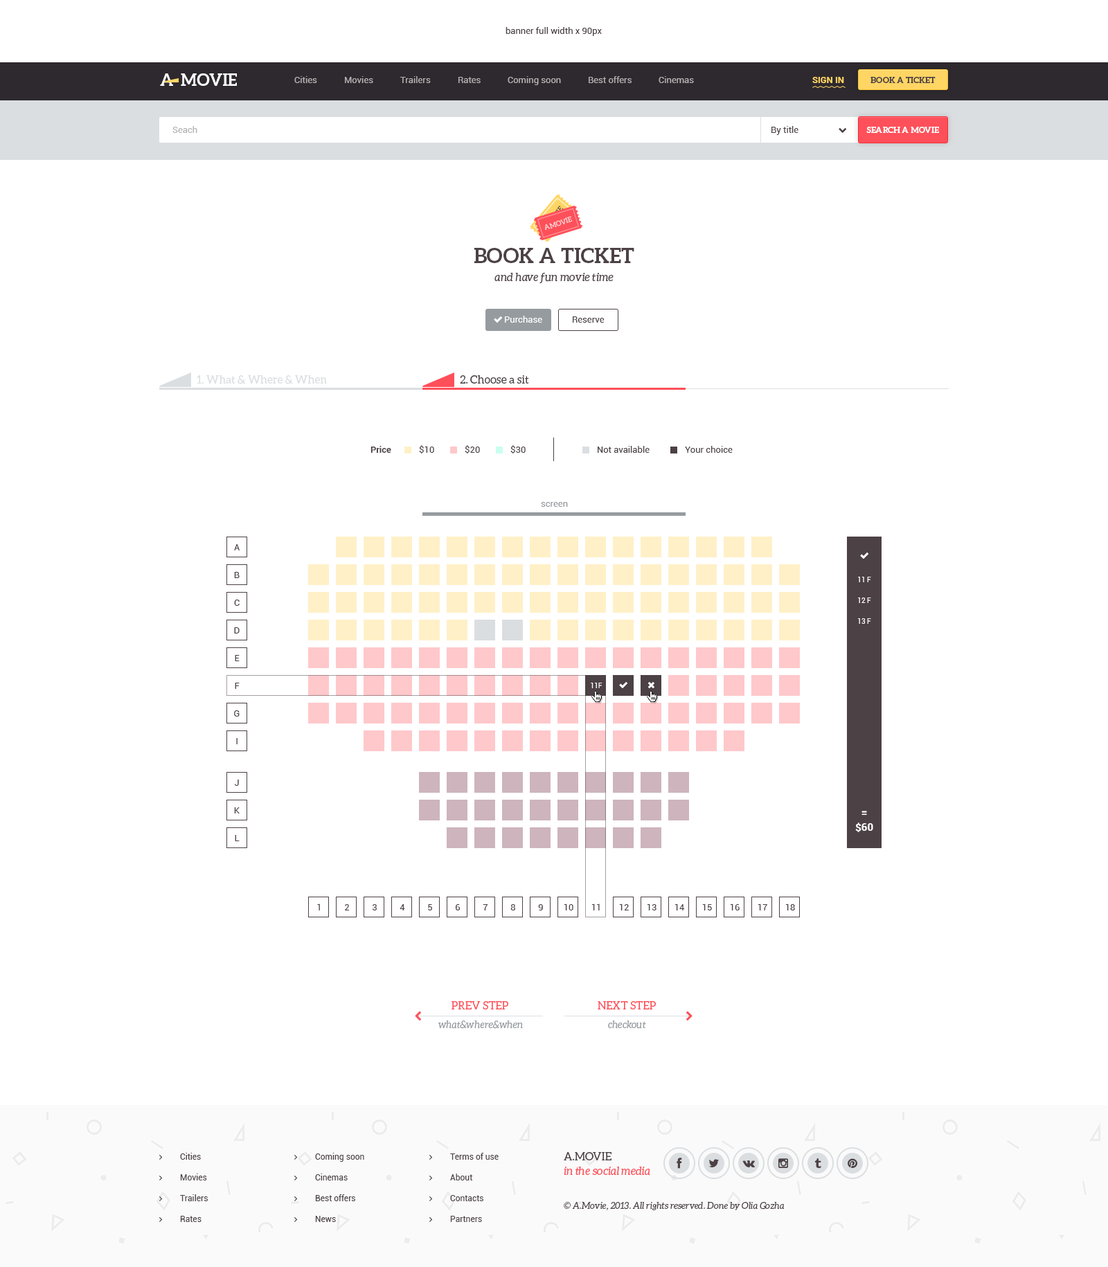
<style>
.page{position:relative;width:1108px;height:1267px;background:#ffffff}
.page>*{position:absolute;margin:0}
.t1{font:9px "Roboto-Regular";color:#4c4145}
.t2{font:16.6px "Aleo-Bold";color:#ffffff;text-transform:uppercase}
.t3{font:9px "Roboto-Regular";color:#b4b1b2}
.t4{font:9px "Roboto-Bold";color:#ffd564;text-transform:uppercase}
.t5{font:8.3px "Aleo-Bold";color:#4c4145;text-transform:uppercase}
.t6{font:8.3px "Aleo-Bold";color:#ffffff;text-transform:uppercase}
.t7{font:6.9px "Aleo-Regular";color:#fe505a;text-transform:uppercase}
.t8{font:6.9px "Aleo-Regular";color:#ffd5d7;text-transform:uppercase}
.t9{font:11.1px/18px "Aleo-Italic";color:#4c4145}
.t10{font:20.8px/18px "Aleo-Bold";color:#4c4145;text-transform:uppercase}
.t11{font:9px "Roboto-Regular";color:#ffffff}
.t12{font:11.1px "Aleo-Regular";color:#dbdee1}
.t13{font:11.1px "Aleo-Regular";color:#4c4145}
.t14{font:9px "Roboto-Bold";color:#4c4145}
.t15{font:9px "Roboto-Regular";color:#969b9f}
.t16{font:6.9px "Roboto-Regular";color:#ffffff}
.t17{font:9px "Roboto-Regular"}
.t18{font:10.4px/14.5px "Roboto-Bold";color:#ffffff}
.t19{font:11.1px "Aleo-Regular";color:#fe505a;text-transform:uppercase}
.t20{font:9.7px "Aleo-Italic";color:#969b9f}
.t21{font:8.3px "Roboto-Regular";color:#4c4145}
.t22{font:11.1px/14.5px "Aleo-Italic";color:#fe505a}
.t23{font:11.1px/14.5px "Aleo-Regular";color:#4c4145;text-transform:uppercase}
.t24{font:9px "Aleo-Italic";color:#4c4145}
</style>
<div class="page">
<p class="t1" style="left:505px;top:27px;width:97px;height:9px">banner full width x 90px</p>
<p class="t2" style="left:160px;top:73px;width:13px;height:13px">A</p>
<p class="t2" style="left:181px;top:73px;width:56px;height:13px">movie</p>
<p class="t3" style="left:294px;top:76px;width:23px;height:7px">Cities</p>
<p class="t3" style="left:345px;top:76px;width:28px;height:7px">Movies</p>
<p class="t3" style="left:400px;top:76px;width:31px;height:7px">Trailers</p>
<p class="t3" style="left:458px;top:77px;width:22px;height:6px">Rates</p>
<p class="t3" style="left:507px;top:76px;width:54px;height:9px">Coming soon</p>
<p class="t3" style="left:588px;top:76px;width:43px;height:7px">Best offers</p>
<p class="t3" style="left:658px;top:76px;width:36px;height:7px">Cinemas</p>
<p class="t4" style="left:812px;top:77px;width:32px;height:6px">Sign in</p>
<p class="t5" style="left:870px;top:77px;width:65px;height:6px">Book a ticket</p>
<p class="t3" style="left:172px;top:126px;width:25px;height:7px">Seach</p>
<p class="t1" style="left:771px;top:126px;width:27px;height:9px">By title</p>
<p class="t6" style="left:866px;top:127px;width:73px;height:6px">search a movie</p>
<p class="t7" style="left:542px;top:206px;width:22px;height:25px;rotate:-50deg">amovie</p>
<p class="t8" style="left:545px;top:216px;width:28px;height:14px;rotate:-17deg">amovie</p>
<p class="t9" style="left:474px;top:248px;width:160px;height:35px;text-align:center"><span class="t10">Book a ticket<br></span>and have fun movie time</p>
<p class="t11" style="left:505px;top:316px;width:37px;height:7px">Purchase</p>
<p class="t1" style="left:573px;top:316px;width:31px;height:7px">Reserve</p>
<p class="t12" style="left:197px;top:375px;width:130px;height:9px">1. What &amp; Where &amp; When</p>
<p class="t13" style="left:460px;top:375px;width:69px;height:9px">2. Choose a sit</p>
<p class="t14" style="left:370px;top:446px;width:21px;height:7px">Price</p>
<p class="t1" style="left:419px;top:445px;width:15px;height:8px">$10</p>
<p class="t1" style="left:465px;top:445px;width:15px;height:8px">$20</p>
<p class="t1" style="left:510px;top:445px;width:15px;height:8px">$30</p>
<p class="t1" style="left:597px;top:446px;width:52px;height:7px">Not available</p>
<p class="t1" style="left:685px;top:446px;width:47px;height:7px">Your choice</p>
<p class="t15" style="left:541px;top:502px;width:27px;height:5px">screen</p>
<p class="t1" style="left:234px;top:544px;width:6px;height:6px">A</p>
<p class="t1" style="left:234px;top:572px;width:6px;height:6px">B</p>
<p class="t16" style="left:858px;top:577px;width:13px;height:5px">11 F</p>
<p class="t1" style="left:234px;top:600px;width:6px;height:6px">C</p>
<p class="t16" style="left:858px;top:597px;width:13px;height:6px">12 F</p>
<p class="t1" style="left:234px;top:627px;width:6px;height:6px">D</p>
<p class="t16" style="left:858px;top:618px;width:13px;height:6px">13 F</p>
<p class="t1" style="left:235px;top:655px;width:5px;height:6px">E</p>
<p class="t1" style="left:235px;top:683px;width:5px;height:6px">F</p>
<p class="t16" style="left:591px;top:683px;width:11px;height:5px">11F</p>
<p class="t1" style="left:234px;top:710px;width:6px;height:7px">G</p>
<p class="t17" style="left:236px;top:738px;width:1px;height:6px">I</p>
<p class="t1" style="left:234px;top:780px;width:5px;height:6px">J</p>
<p class="t1" style="left:234px;top:807px;width:6px;height:6px">K</p>
<p class="t18" style="left:855px;top:811px;width:18px;height:21px;text-align:center">=<br>$60</p>
<p class="t1" style="left:235px;top:835px;width:5px;height:6px">L</p>
<p class="t1" style="left:317px;top:903px;width:3px;height:7px">1</p>
<p class="t1" style="left:345px;top:904px;width:5px;height:6px">2</p>
<p class="t1" style="left:372px;top:904px;width:5px;height:6px">3</p>
<p class="t1" style="left:399px;top:904px;width:6px;height:6px">4</p>
<p class="t1" style="left:428px;top:904px;width:4px;height:6px">5</p>
<p class="t1" style="left:456px;top:904px;width:4px;height:6px">6</p>
<p class="t1" style="left:483px;top:904px;width:5px;height:6px">7</p>
<p class="t1" style="left:510px;top:904px;width:5px;height:6px">8</p>
<p class="t1" style="left:538px;top:904px;width:5px;height:6px">9</p>
<p class="t1" style="left:564px;top:903px;width:9px;height:7px">10</p>
<p class="t1" style="left:591px;top:903px;width:9px;height:7px">11</p>
<p class="t1" style="left:619px;top:903px;width:10px;height:7px">12</p>
<p class="t1" style="left:647px;top:903px;width:9px;height:7px">13</p>
<p class="t1" style="left:674px;top:903px;width:11px;height:7px">14</p>
<p class="t1" style="left:702px;top:903px;width:10px;height:7px">15</p>
<p class="t1" style="left:730px;top:903px;width:9px;height:7px">16</p>
<p class="t1" style="left:757px;top:903px;width:10px;height:7px">17</p>
<p class="t1" style="left:785px;top:903px;width:10px;height:7px">18</p>
<p class="t19" style="left:451px;top:1001px;width:57px;height:8px">prev step</p>
<p class="t19" style="left:597px;top:1001px;width:59px;height:8px">next step</p>
<p class="t20" style="left:438px;top:1020px;width:85px;height:9px">what&amp;where&amp;when</p>
<p class="t20" style="left:608px;top:1020px;width:38px;height:9px">checkout</p>
<p class="t21" style="left:180px;top:1153px;width:21px;height:7px">Cities</p>
<p class="t21" style="left:315px;top:1153px;width:49px;height:9px">Coming soon</p>
<p class="t21" style="left:450px;top:1153px;width:48px;height:7px">Terms of use</p>
<p class="t22" style="left:564px;top:1152px;width:86px;height:24px"><span class="t23">A.Movie <br></span>in the social media</p>
<p class="t21" style="left:180px;top:1173px;width:27px;height:7px">Movies</p>
<p class="t21" style="left:315px;top:1173px;width:33px;height:7px">Cinemas</p>
<p class="t21" style="left:450px;top:1173px;width:23px;height:7px">About</p>
<p class="t21" style="left:180px;top:1194px;width:28px;height:7px">Trailers</p>
<p class="t21" style="left:315px;top:1194px;width:40px;height:7px">Best offers</p>
<p class="t21" style="left:450px;top:1195px;width:33px;height:6px">Contacts</p>
<p class="t24" style="left:564px;top:1202px;width:220px;height:8px">© A.Movie, 2013. All rights reserved. Done by Olia Gozha</p>
<p class="t21" style="left:180px;top:1216px;width:21px;height:6px">Rates</p>
<p class="t21" style="left:315px;top:1216px;width:21px;height:6px">News</p>
<p class="t21" style="left:450px;top:1216px;width:32px;height:6px">Partners</p>
</div>
